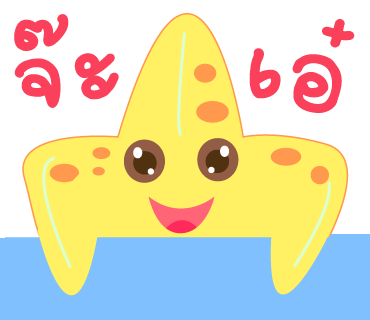
<style>
.page{position:relative;width:370px;height:320px;background:#ffffff}
.page>*{position:absolute;margin:0}
.t1{font:145px "2005_iannnnnMTV";letter-spacing:0.025em;color:#fa405a;scale:1.06 1}
.t2{font:151px "2005_iannnnnMTV";letter-spacing:0.025em;color:#fa405a;scale:1.06 1}
</style>
<div class="page">
<p class="t1" style="left:14px;top:14px;width:105px;height:94px;rotate:-8deg">จ๊ะ</p>
<p class="t2" style="left:249px;top:19px;width:106px;height:94px;rotate:9deg">เอ๋</p>
</div>
